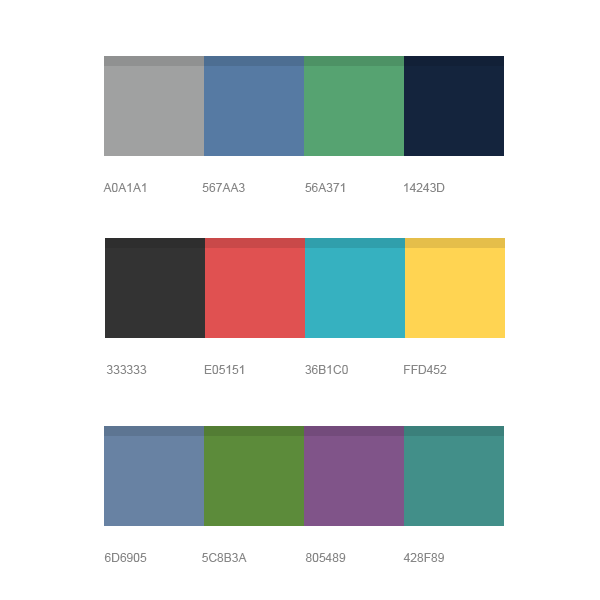
<style>
.page{position:relative;width:600px;height:600px;background:#ffffff}
.page>*{position:absolute;margin:0}
.t1{font:12px "ArialMT";color:#878787;text-transform:uppercase}
</style>
<div class="page">
<p class="t1" style="left:103px;top:183px;width:43px;height:9px">a0a1a1</p>
<p class="t1" style="left:202px;top:183px;width:43px;height:9px">567aa3</p>
<p class="t1" style="left:305px;top:183px;width:40px;height:9px">56a371</p>
<p class="t1" style="left:404px;top:183px;width:41px;height:9px">14243d</p>
<p class="t1" style="left:106px;top:365px;width:41px;height:9px">333333</p>
<p class="t1" style="left:204px;top:365px;width:40px;height:9px">e05151</p>
<p class="t1" style="left:305px;top:365px;width:43px;height:9px">36b1c0</p>
<p class="t1" style="left:404px;top:365px;width:43px;height:9px">ffd452</p>
<p class="t1" style="left:104px;top:553px;width:43px;height:9px">6d6905</p>
<p class="t1" style="left:202px;top:553px;width:45px;height:9px">5c8b3a</p>
<p class="t1" style="left:305px;top:553px;width:41px;height:9px">805489</p>
<p class="t1" style="left:403px;top:553px;width:41px;height:9px">428f89</p>
</div>
